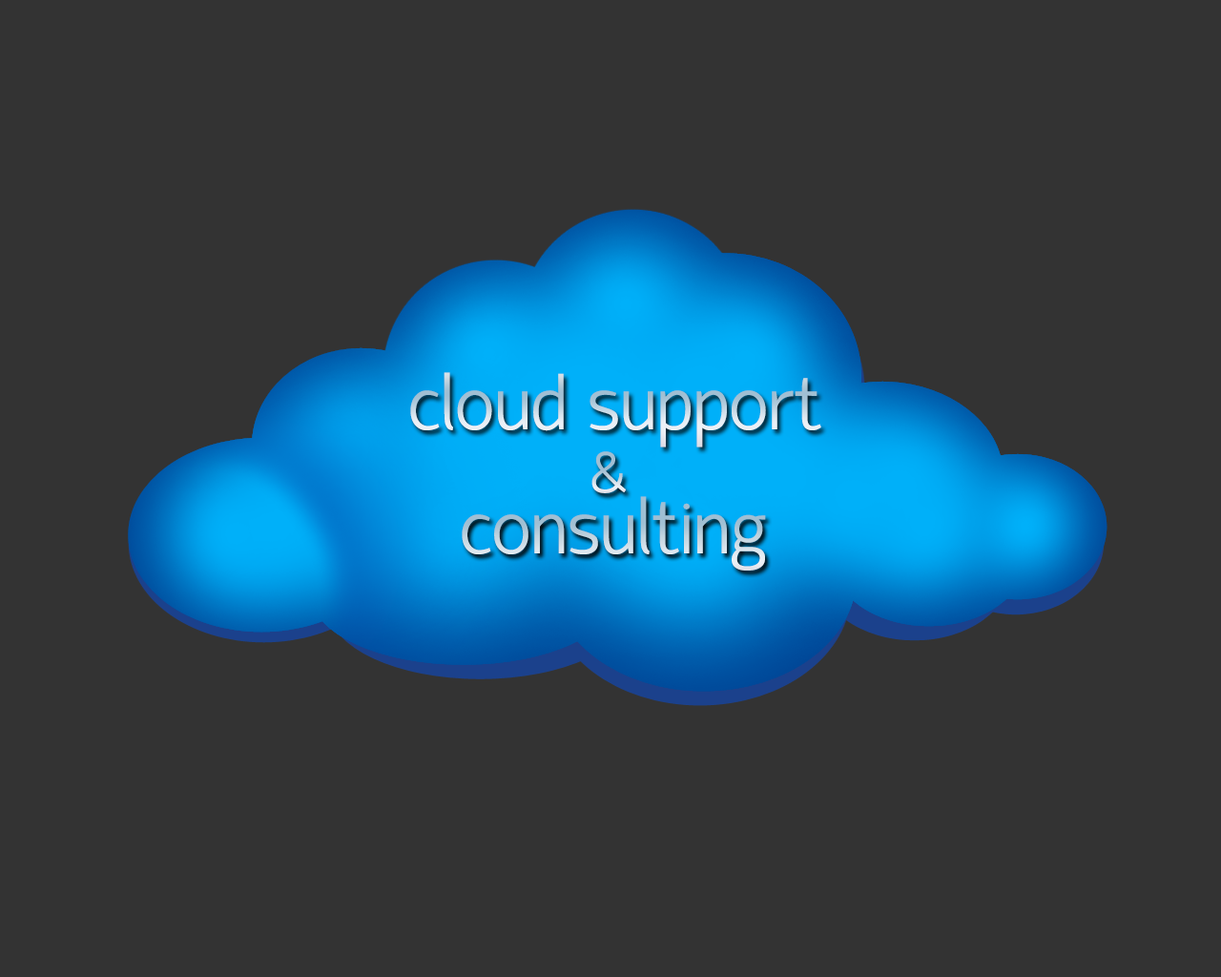
<style>
.page{position:relative;width:1221px;height:977px;background:#333333}
.page>*{position:absolute;margin:0}
.t1{font:81.1px "HattoriHanzo-Light"}
.t2{font:57.2px "HattoriHanzo-Light"}
</style>
<div class="page">
<p class="t1" style="left:410px;top:372px;width:411px;height:75px">cloud support</p>
<p class="t2" style="left:591px;top:451px;width:35px;height:42px">&amp;</p>
<p class="t1" style="left:462px;top:496px;width:304px;height:74px">consulting</p>
</div>
